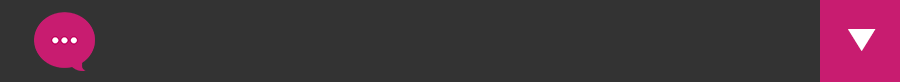
<style>
.page{position:relative;width:900px;height:82px;background:#333333}
.page>*{position:absolute;margin:0}
.t1{font:33.5px "NanumGothicExtraBold";letter-spacing:0.16em;color:#ffffff;font-weight:bold}
</style>
<div class="page">
<p class="t1" style="left:848px;top:29px;width:28px;height:22px">▼</p>
</div>
